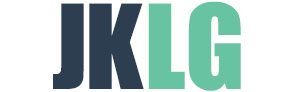
<style>
.page{position:relative;width:300px;height:92px;background:#ffffff}
.page>*{position:absolute;margin:0}
.t1{font:108.3px "Impact";letter-spacing:0.05em;color:#2c3e50}
.t2{font:108.3px "Impact";letter-spacing:0.05em;color:#68c3a3}
</style>
<div class="page">
<p class="t1" style="left:53px;top:3px;width:31px;height:86px">J</p>
<p class="t1" style="left:89px;top:3px;width:55px;height:86px">K</p>
<p class="t2" style="left:148px;top:3px;width:37px;height:86px">L</p>
<p class="t2" style="left:188px;top:1px;width:53px;height:90px">G</p>
</div>
